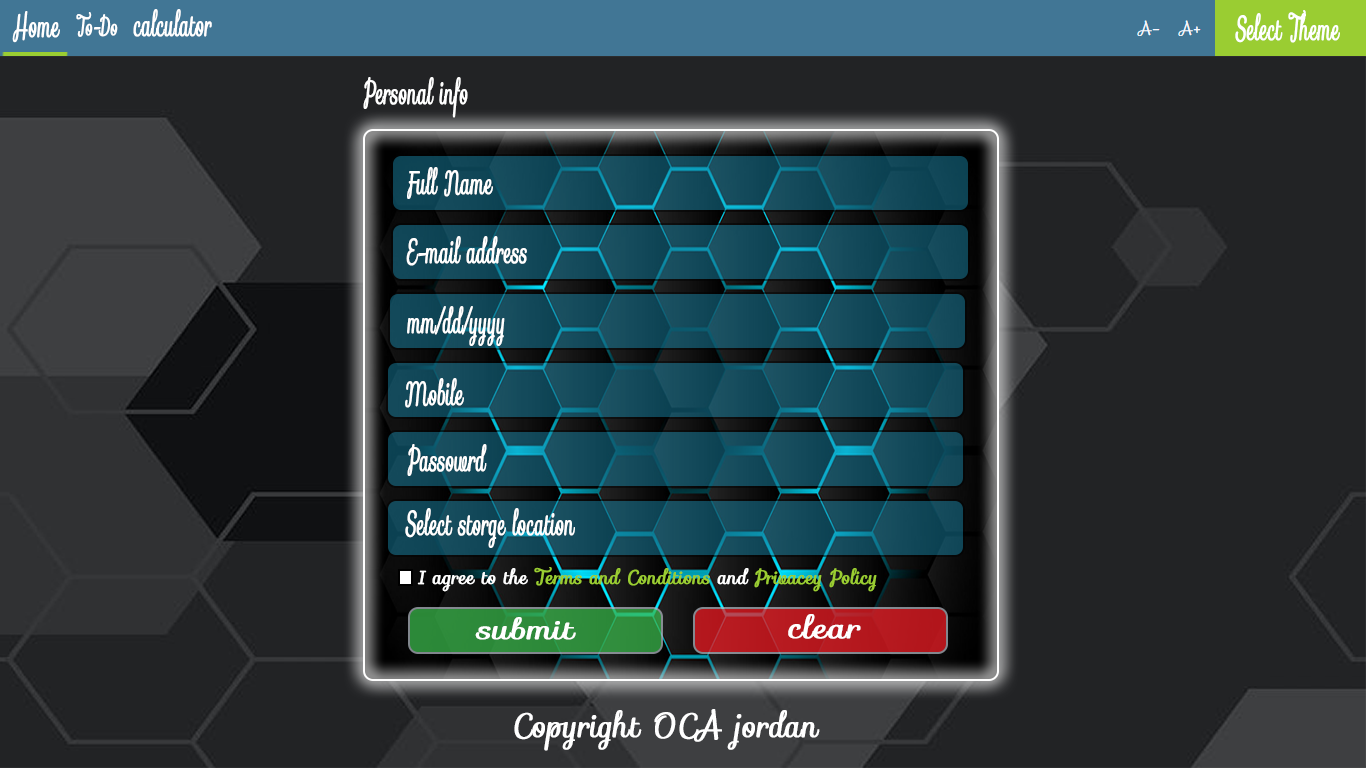
<style>
.page{position:relative;width:1366px;height:768px;background:#222325}
.page>*{position:absolute;margin:0}
.t1{font:33px "Sofia-Regular";color:#ffffff;font-weight:bold;font-style:italic;scale:0.53 1}
.t2{font:25.1px "Sofia-Regular";color:#ffffff;font-weight:bold;font-style:italic;scale:0.59 1}
.t3{font:19.2px "Sofia-Regular";color:#9acd32;font-weight:bold;font-style:italic;scale:0.91 1}
.t4{font:19.2px "Sofia-Regular";color:#ffffff;font-weight:bold;font-style:italic;scale:0.91 1}
.t5{font:27.7px "Sofia-Regular";color:#ffffff;font-weight:bold;font-style:italic;scale:1.2 1}
.t6{font:30px "Sofia-Regular";color:#ffffff;font-weight:bold;font-style:italic;scale:1.11 1}
.t7{font:33px "Sofia-Regular";color:#ffffff;font-weight:bold;font-style:italic;scale:0.88 1}
</style>
<div class="page">
<p class="t1" style="left:12px;top:11px;width:48px;height:32px">Home</p>
<p class="t2" style="left:76px;top:12px;width:42px;height:25px">To-Do</p>
<p class="t1" style="left:133px;top:9px;width:79px;height:28px">calculator</p>
<p class="t1" style="left:1235px;top:10px;width:105px;height:33px">Select Theme</p>
<p class="t1" style="left:363px;top:77px;width:105px;height:41px">Personal info</p>
<p class="t1" style="left:407px;top:167px;width:86px;height:32px">Full Name</p>
<p class="t1" style="left:406px;top:236px;width:121px;height:30px">E-mail address</p>
<p class="t1" style="left:407px;top:306px;width:98px;height:40px">mm/dd/yyyy</p>
<p class="t1" style="left:405px;top:378px;width:59px;height:30px">Mobile</p>
<p class="t1" style="left:407px;top:444px;width:80px;height:32px">Passowrd</p>
<p class="t1" style="left:405px;top:508px;width:170px;height:40px">Select storge location</p>
<p class="t3" style="left:417px;top:567px;width:460px;height:25px"><span class="t4">I agree to the </span>Terms and Conditions<span class="t4"> and </span>Privacey Policy</p>
<p class="t5" style="left:475px;top:617px;width:101px;height:23px">submit</p>
<p class="t6" style="left:788px;top:614px;width:73px;height:25px">clear</p>
<p class="t7" style="left:514px;top:709px;width:306px;height:42px">Copyright OCA jordan</p>
</div>
